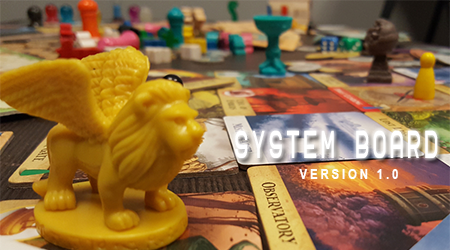
<style>
.page{position:relative;width:450px;height:250px}
.page>*{position:absolute;margin:0}
.t1{font:36.2px "AnakinMono";letter-spacing:0.2em;color:#ffffff;text-transform:uppercase;scale:0.53 1}
.t2{font:14px "ArialNarrow-Bold";letter-spacing:0.2em;color:#ffffff;text-transform:uppercase}
</style>
<div class="page">
<p class="t1" style="left:235px;top:130px;width:203px;height:28px">SYstem Board</p>
<p class="t2" style="left:299px;top:169px;width:99px;height:10px">VERSION 1.0</p>
</div>
